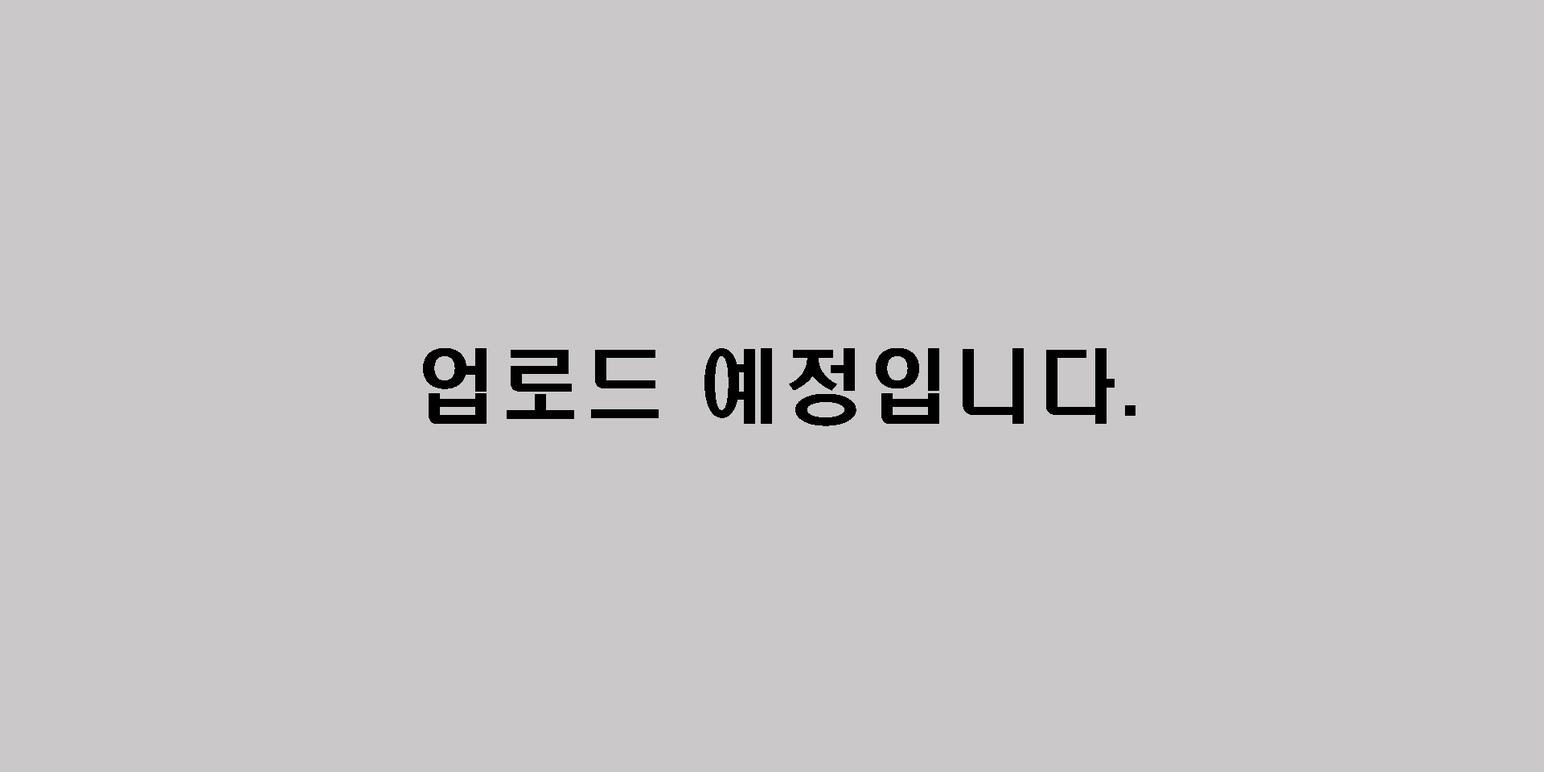
<style>
.page{position:relative;width:1544px;height:772px;background:#cac8c8}
.page>*{position:absolute;margin:0}
.t1{font:80.4px "H2hdrM";letter-spacing:0.05em;color:#000000}
</style>
<div class="page">
<p class="t1" style="left:423px;top:348px;width:713px;height:78px">업로드 예정입니다.</p>
</div>
